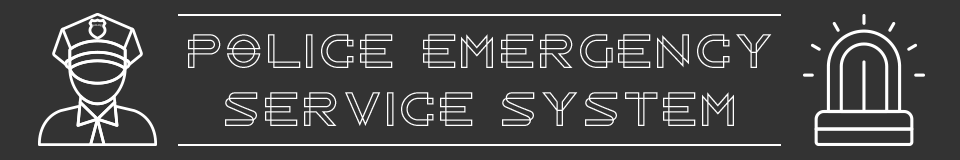
<style>
.page{position:relative;width:960px;height:160px;background:#333333}
.page>*{position:absolute;margin:0}
.t1{font:48px "RadonRegular";color:#ffffff}
</style>
<div class="page">
<p class="t1" style="left:188px;top:34px;width:584px;height:92px;text-align:center">Police Emergency<br>Service System</p>
</div>
